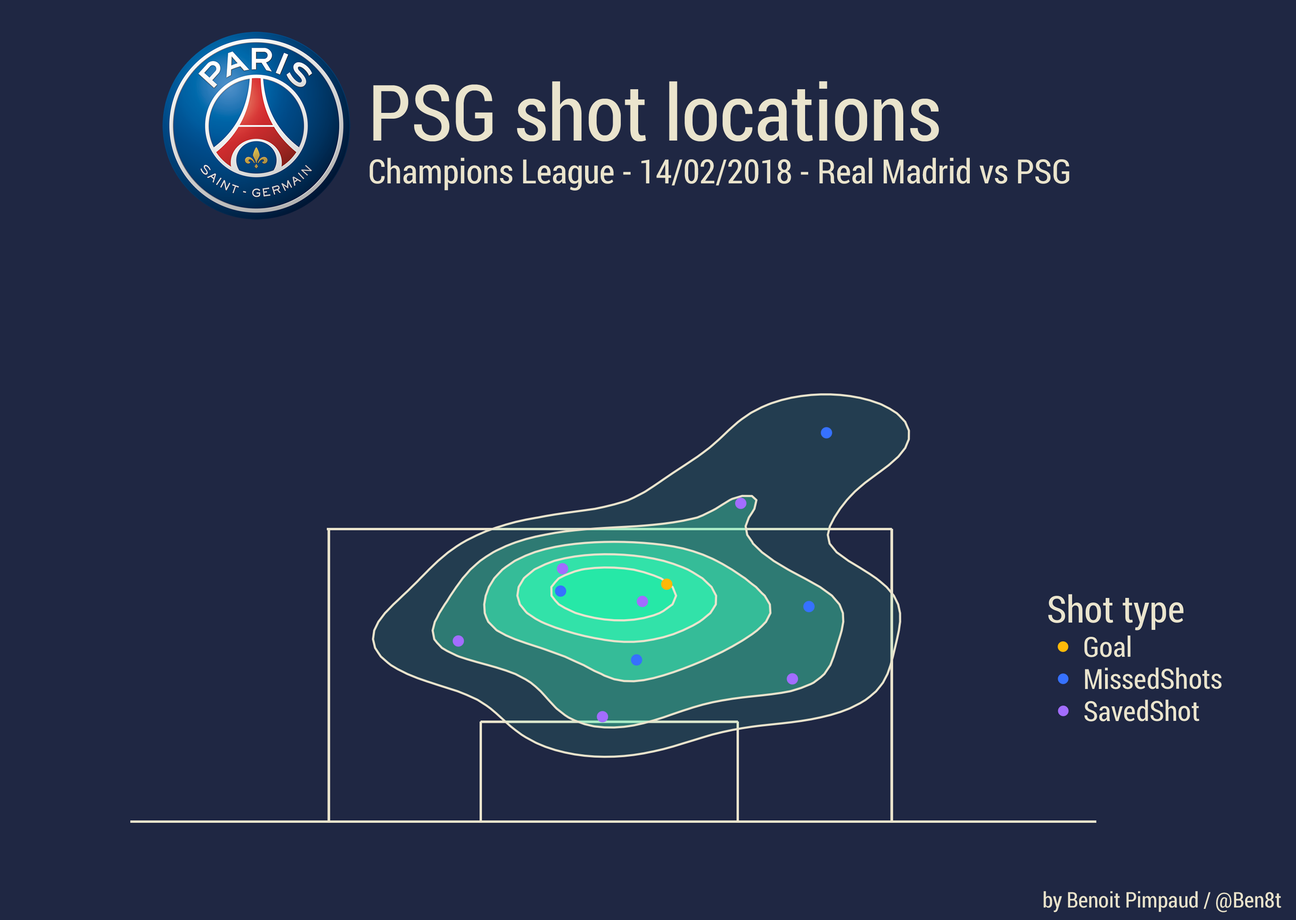
<style>
.page{position:relative;width:1296px;height:920px;background:#1f2743}
.page>*{position:absolute;margin:0}
.t1{font:77.7px "RobotoCondensed-Regular";color:#eae4cd}
.t2{font:33.5px "RobotoCondensed-Regular";color:#eae4cd}
.t3{font:21.4px "RobotoCondensed-Regular";color:#e9e3cc}
</style>
<div class="page">
<p class="t1" style="left:373px;top:81px;width:566px;height:60px">PSG shot locations</p>
<p class="t2" style="left:369px;top:158px;width:700px;height:33px">Champions League - 14/02/2018 - Real Madrid vs PSG</p>
<p class="t3" style="left:1043px;top:891px;width:238px;height:22px">by Benoit Pimpaud / @Ben8t</p>
</div>
